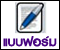
<style>
.page{position:relative;width:60px;height:50px;background:#ffffff}
.page>*{position:absolute;margin:0}
.t1{font:18px "PSLxKittithada-Bold";color:#490681;font-weight:bold}
</style>
<div class="page">
<p class="t1" style="left:3px;top:36px;width:54px;height:11px">แบบฟอร์ม</p>
</div>
